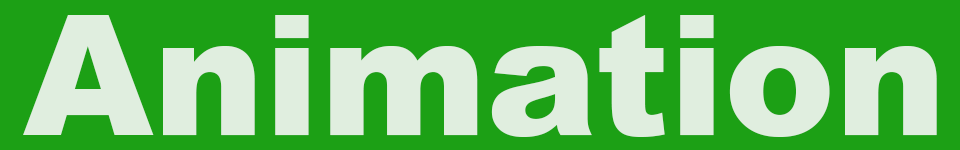
<style>
.page{position:relative;width:960px;height:150px;background:#1ca015}
.page>*{position:absolute;margin:0}
.t1{font:166.7px "Arial-Black";color:#e0eedf}
</style>
<div class="page">
<p class="t1" style="left:23px;top:15px;width:914px;height:122px">Animation</p>
</div>
